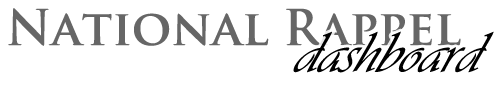
<style>
.page{position:relative;width:500px;height:95px;background:#ffffff}
.page>*{position:absolute;margin:0}
.t1{font:48px "TrajanPro-Bold";color:#666666}
.t2{font:60px "Vivaldii";color:#000000;font-style:italic}
</style>
<div class="page">
<p class="t1" style="left:8px;top:8px;width:453px;height:38px">National Rappel</p>
<p class="t2" style="left:293px;top:31px;width:201px;height:42px">dashboard</p>
</div>
